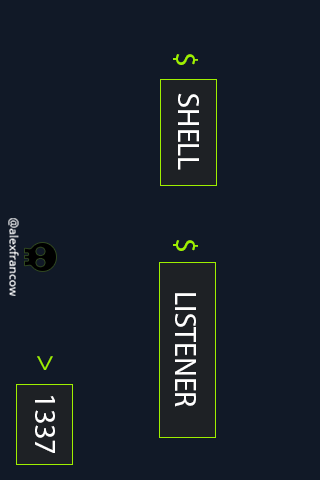
<style>
.page{position:relative;width:320px;height:480px;background:#111927}
.page>*{position:absolute;margin:0}
.t1{font:30px "MyriadPro-Regular";color:#9fef00}
.t2{font:30px "MyriadPro-Regular";color:#ffffff}
.t3{font:12px "OpenSans-Regular";color:#ffffff}
</style>
<div class="page">
<p class="t1" style="left:173px;top:54px;width:25px;height:11px;rotate:90deg">$</p>
<p class="t2" style="left:178px;top:93px;width:21px;height:77px;rotate:90deg">SHELL</p>
<p class="t3" style="left:8px;top:218px;width:11px;height:78px;rotate:90deg">@alexfrancow</p>
<p class="t1" style="left:173px;top:240px;width:25px;height:11px;rotate:90deg">$</p>
<p class="t2" style="left:175px;top:293px;width:21px;height:114px;rotate:90deg">LISTENER</p>
<p class="t1" style="left:37px;top:356px;width:16px;height:14px;rotate:90deg">&gt;</p>
<p class="t2" style="left:35px;top:396px;width:20px;height:57px;rotate:90deg">1337</p>
</div>
